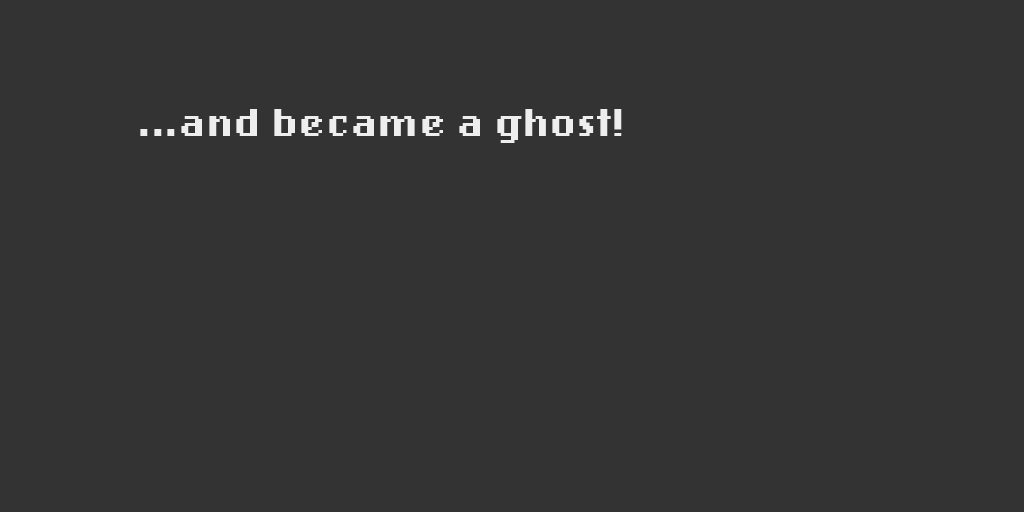
<style>
.page{position:relative;width:1024px;height:512px;background:#333333}
.page>*{position:absolute;margin:0}
.t1{font:41.2px "LoRes12OT-Bold";color:#eeeeee}
</style>
<div class="page">
<p class="t1" style="left:140px;top:109px;width:482px;height:34px">...and became a ghost!</p>
</div>
